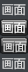
<style>
.page{position:relative;width:28px;height:72px;background:#3d4145}
.page>*{position:absolute;margin:0}
.t1{font:12px "MicrosoftYaHei";color:#dcdcdc}
.t2{font:12px "MicrosoftYaHei";color:#ffffff}
</style>
<div class="page">
<p class="t1" style="left:2px;top:4px;width:24px;height:12px">画面</p>
<p class="t2" style="left:2px;top:22px;width:24px;height:12px">画面</p>
<p class="t1" style="left:3px;top:41px;width:24px;height:12px">画面</p>
<p class="t1" style="left:2px;top:58px;width:24px;height:12px">画面</p>
</div>
